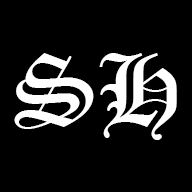
<style>
.page{position:relative;width:192px;height:192px;background:#000000}
.page>*{position:absolute;margin:0}
.t1{font:100px "OldEnglishTextMT";color:#ffffff}
</style>
<div class="page">
<p class="t1" style="left:14px;top:53px;width:163px;height:87px">SH</p>
</div>
